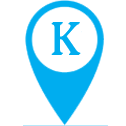
<style>
.page{position:relative;width:126px;height:126px;background:#ffffff}
.page>*{position:absolute;margin:0}
.t1{font:48.1px "CambriaMath";color:#00adef}
</style>
<div class="page">
<p class="t1" style="left:51px;top:23px;width:29px;height:32px">K</p>
<p class="t1" style="left:52px;top:22px;width:29px;height:32px">K</p>
</div>
